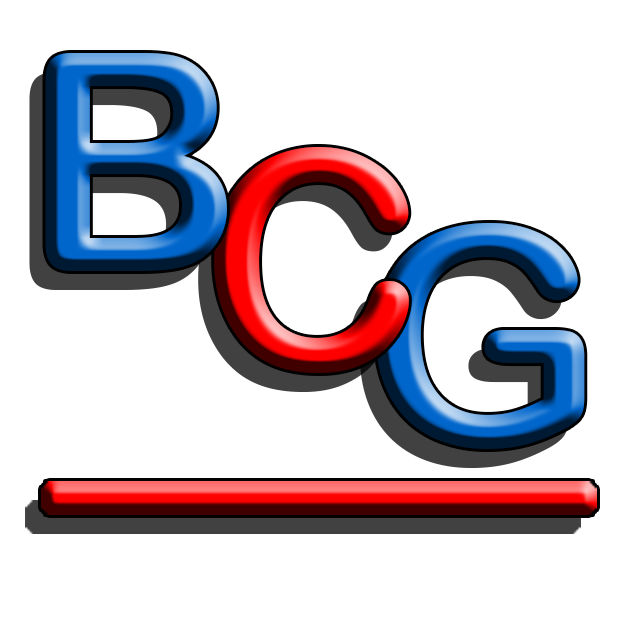
<style>
.page{position:relative;width:630px;height:630px;background:#ffffff}
.page>*{position:absolute;margin:0}
.t1{font:304.6px "ArialRoundedMTBold"}
</style>
<div class="page">
<p class="t1" style="left:45px;top:53px;width:182px;height:218px">B</p>
<p class="t1" style="left:214px;top:147px;width:195px;height:226px">C</p>
<p class="t1" style="left:375px;top:223px;width:210px;height:226px">G</p>
</div>
